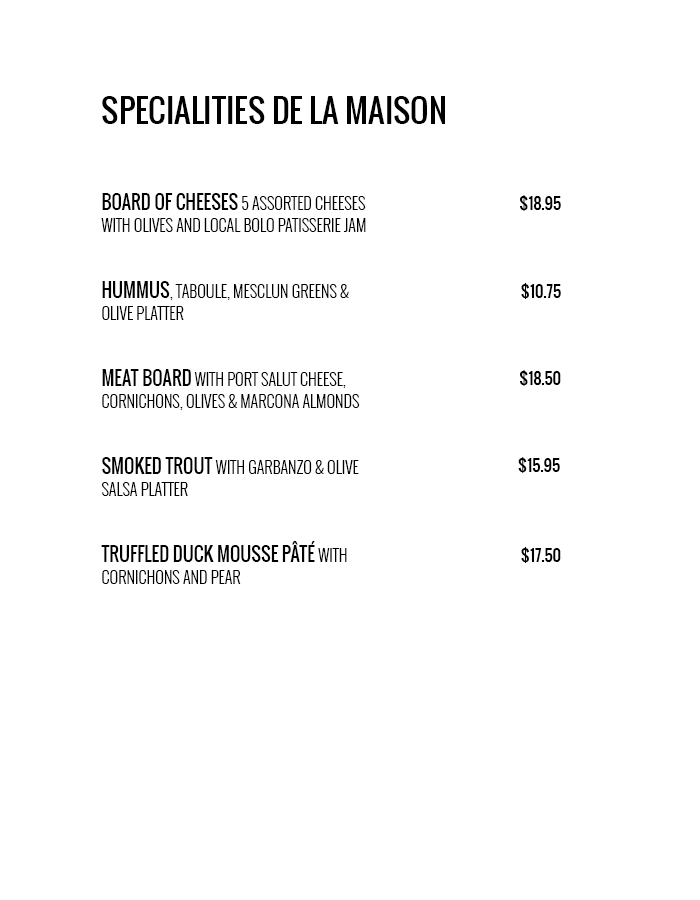
<style>
.page{position:relative;width:700px;height:900px;background:#ffffff}
.page>*{position:absolute;margin:0}
.t1{font:32px "Oswald-Regular";color:#000000}
.t2{font:16px/22px "Oswald-Light";color:#000000;text-transform:uppercase}
.t3{font:18px/22px "Oswald-Regular";color:#000000;text-transform:uppercase}
.t4{font:16px "Oswald-Regular";color:#000000}
</style>
<div class="page">
<p class="t1" style="left:102px;top:96px;width:343px;height:28px">SPECIALITIES DE LA MAISON</p>
<p class="t2" style="left:101px;top:193px;width:265px;height:391px"><span class="t3">BOARD OF CHEESES</span> 5 Assorted cheeses with olives and local Bolo Patisserie jam<br><br><br><span class="t3">HUMMUS</span>, taboule, mesclun greens &amp; olive platter<br><br><br><span class="t3">MEAT BOARD</span> with Port Salut cheese, cornichons, olives &amp; Marcona almonds<br><br><br><span class="t3">SMOKED TROUT </span>with garbanzo &amp; olive salsa platter<br><br><br><span class="t3">Truffled Duck Mousse Pâté </span>with cornichons and pear</p>
<p class="t4" style="left:519px;top:195px;width:42px;height:16px">$18.95</p>
<p class="t4" style="left:521px;top:283px;width:40px;height:16px">$10.75</p>
<p class="t4" style="left:519px;top:370px;width:42px;height:16px">$18.50</p>
<p class="t4" style="left:518px;top:457px;width:42px;height:16px">$15.95</p>
<p class="t4" style="left:521px;top:547px;width:40px;height:16px">$17.50</p>
</div>
